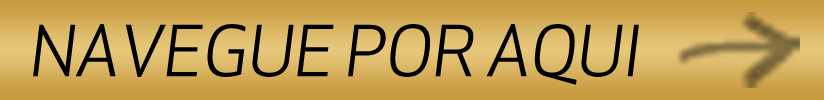
<style>
.page{position:relative;width:824px;height:100px}
.page>*{position:absolute;margin:0}
.t1{font:68.8px "ApexNew-BookItalic";color:#000000}
</style>
<div class="page">
<p class="t1" style="left:33px;top:24px;width:606px;height:61px">NAVEGUE POR AQUI</p>
</div>
